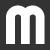
<style>
.page{position:relative;width:50px;height:50px;background:#333333}
.page>*{position:absolute;margin:0}
.t1{font:55px "Regular";color:#fffefe}
</style>
<div class="page">
<p class="t1" style="left:6px;top:5px;width:39px;height:39px">M</p>
</div>
